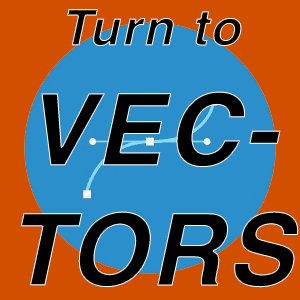
<style>
.page{position:relative;width:300px;height:300px;background:#d24f00}
.page>*{position:absolute;margin:0}
.t1{font:100px "Helvetica-BoldOblique";letter-spacing:0.04em;color:#000000}
.t2{font:50px "Helvetica-BoldOblique";letter-spacing:0.04em;color:#000000}
</style>
<div class="page">
<p class="t1" style="left:20px;top:9px;width:279px;height:279px;text-align:center"><span class="t2">Turn to<br></span>VEC-<br>TORS</p>
</div>
